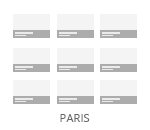
<style>
.page{position:relative;width:150px;height:130px;background:#ffffff}
.page>*{position:absolute;margin:0}
.t1{font:11px "OpenSans";color:#686868;text-transform:uppercase}
</style>
<div class="page">
<p class="t1" style="left:60px;top:114px;width:30px;height:8px">Paris</p>
</div>
